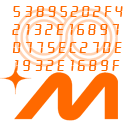
<style>
.page{position:relative;width:128px;height:128px;background:#ffffff}
.page>*{position:absolute;margin:0}
.t1{font:15px "LiquidCrystalPlain";color:#ff6900}
</style>
<div class="page">
<p class="t1" style="left:12px;top:6px;width:111px;height:65px">53895202f4<br>2132e16897<br>d775ec27de<br>1932e1689f</p>
</div>
